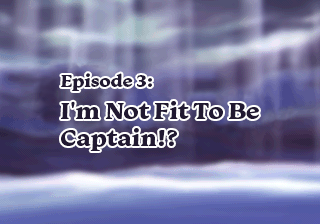
<style>
.page{position:relative;width:320px;height:224px}
.page>*{position:absolute;margin:0}
.t1{font:24px/32px "Monarcha-Bold";color:#211931}
.t2{font:18px/30px "Monarcha-Bold";color:#211931}
.t3{font:24px/27px "Monarcha-Bold";color:#211931}
</style>
<div class="page">
<p class="t1" style="left:61px;top:73px;width:198px;height:78px"><span class="t2">Episode 3:<br></span>I'm Not Fit To Be<br><span class="t3">Captain!?</span></p>
</div>
